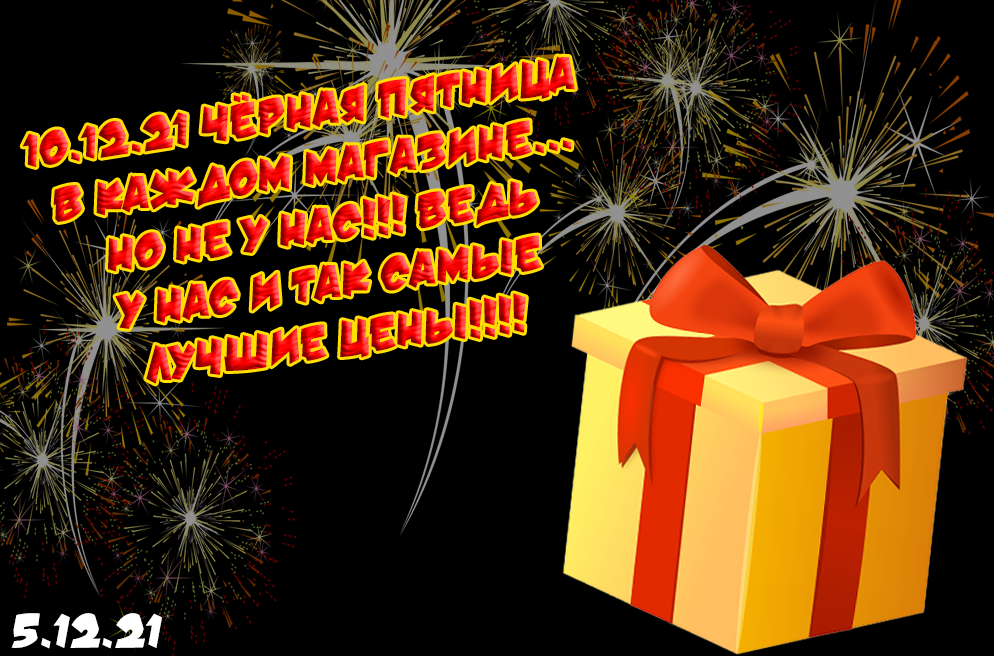
<style>
.page{position:relative;width:994px;height:656px;background:#000000}
.page>*{position:absolute;margin:0}
.t1{font:48px "damn_noisy_kids_rus"}
.t2{font:48px "damn_noisy_kids_rus";color:#ffffff}
</style>
<div class="page">
<p class="t1" style="left:22px;top:56px;width:553px;height:328px;text-align:center;rotate:-8deg">10.12.21 Чёрная пятница <br>в каждом магазине...<br>но не у нас!!! Ведь<br>У нас и так самые<br>лучшие цены!!!!</p>
<p class="t2" style="left:11px;top:613px;width:151px;height:36px">5.12.21</p>
</div>
